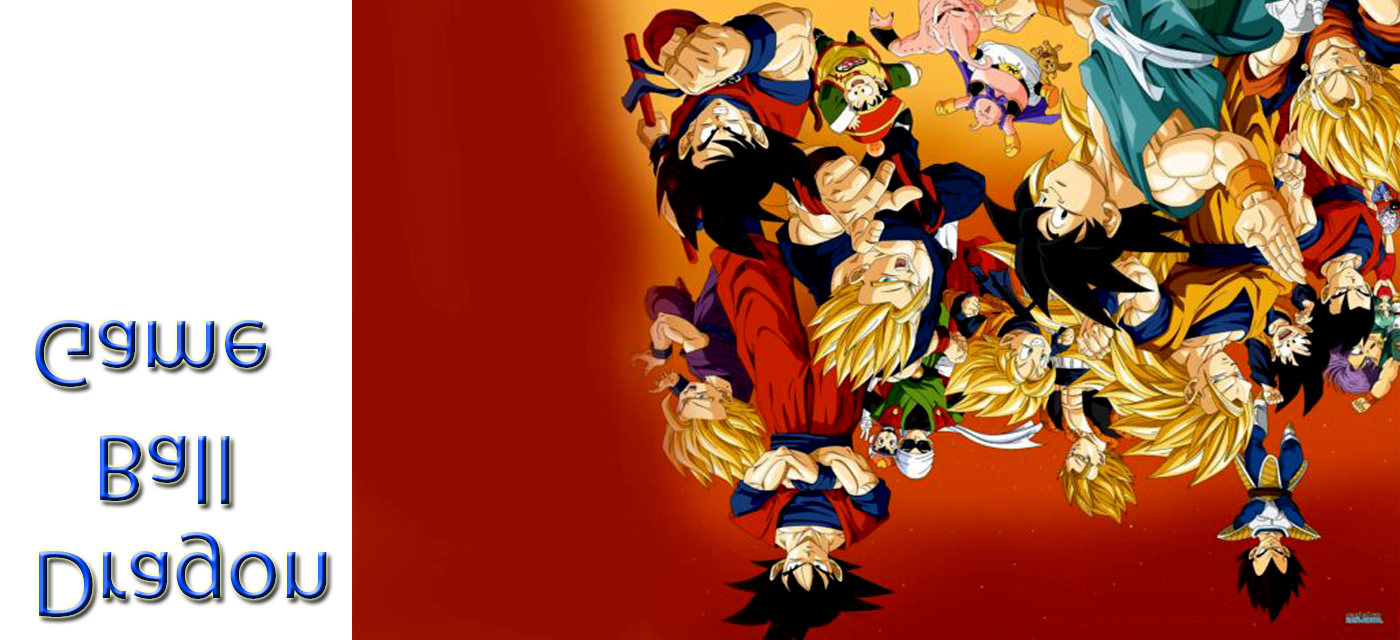
<style>
.page{position:relative;width:1400px;height:640px;background:#ffffff}
.page>*{position:absolute;margin:0}
.t1{font:96.1px "MyriadPro-Regular"}
</style>
<div class="page">
<p class="t1" style="left:35px;top:320px;width:292px;height:297px">Dragon<br>   Ball <br>Game</p>
</div>
